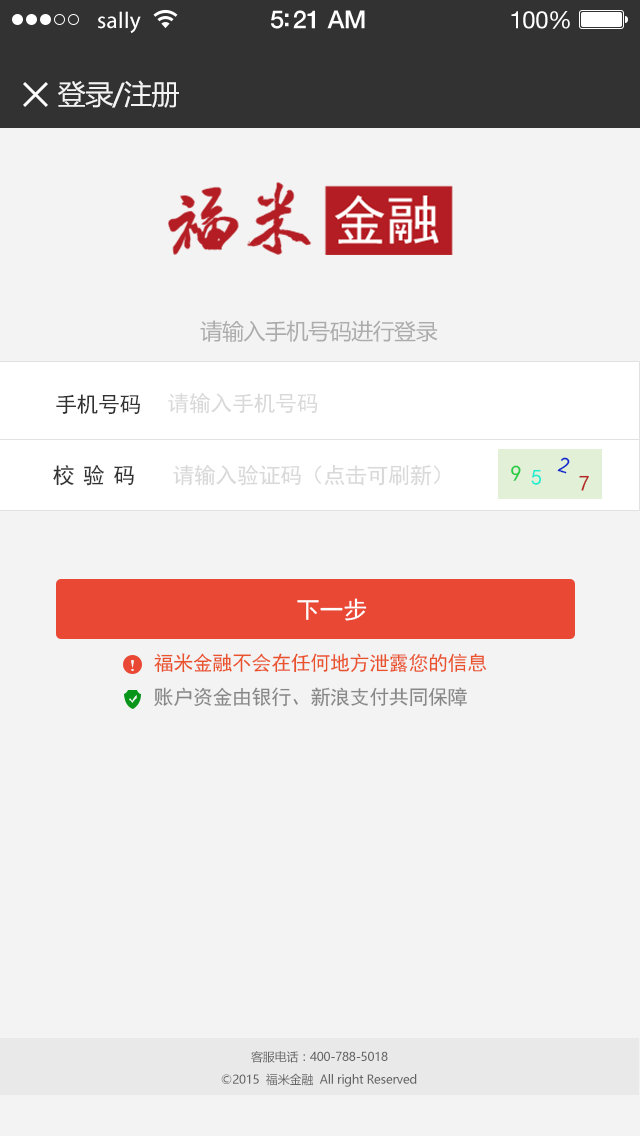
<style>
.page{position:relative;width:640px;height:1136px;background:#f3f3f3}
.page>*{position:absolute;margin:0}
.t1{font:23px "MyriadPro-Regular";letter-spacing:0.02em;color:#ffffff}
.t2{font:25px "HelveticaNeue-Medium";letter-spacing:-0.02em;color:#ffffff}
.t3{font:24px "HelveticaNeue";letter-spacing:-0.02em;color:#ffffff}
.t4{font:28px "MicrosoftYaHei";letter-spacing:-0.02em;color:#f3f3f3}
.t5{font:22px "MicrosoftYaHei";letter-spacing:-0.02em;color:#acacac}
.t6{font:22px "SimHei";letter-spacing:-0.02em;color:#323232}
.t7{font:22px "SimHei";letter-spacing:-0.02em;color:#d9d9d9}
.t8{font:22px "SimHei";letter-spacing:-0.02em;color:#0e29cd}
.t9{font:22px "SimHei";letter-spacing:0.38em;color:#323232}
.t10{font:22px "SimHei";letter-spacing:-0.02em;color:#28cc47}
.t11{font:22px "SimHei";letter-spacing:-0.02em;color:#1eecd1}
.t12{font:22px "SimHei";letter-spacing:-0.02em;color:#b62626}
.t13{font:24px "SimHei";letter-spacing:-0.02em;color:#ffffff}
.t14{font:20px "SimHei";letter-spacing:-0.02em;color:#ea522b}
.t15{font:20px "SimHei";letter-spacing:-0.02em;color:#878787}
.t16{font:12px "MicrosoftYaHei";letter-spacing:-0.02em;color:#646464}
</style>
<div class="page">
<p class="t1" style="left:98px;top:11px;width:43px;height:22px">sally</p>
<p class="t2" style="left:271px;top:10px;width:94px;height:19px">5:21 AM</p>
<p class="t3" style="left:511px;top:11px;width:59px;height:18px">100%</p>
<p class="t4" style="left:58px;top:80px;width:121px;height:28px">登录/注册</p>
<p class="t5" style="left:200px;top:320px;width:238px;height:22px">请输入手机号码进行登录</p>
<p class="t6" style="left:56px;top:394px;width:84px;height:21px">手机号码</p>
<p class="t7" style="left:168px;top:392px;width:150px;height:22px">请输入手机号码</p>
<p class="t8" style="left:557px;top:457px;width:13px;height:17px;rotate:18deg">2</p>
<p class="t9" style="left:53px;top:465px;width:81px;height:21px">校验码</p>
<p class="t7" style="left:173px;top:464px;width:267px;height:22px">请输入验证码（点击可刷新）</p>
<p class="t10" style="left:511px;top:465px;width:10px;height:16px">9</p>
<p class="t11" style="left:531px;top:469px;width:11px;height:16px">5</p>
<p class="t12" style="left:579px;top:475px;width:10px;height:16px">7</p>
<p class="t13" style="left:297px;top:598px;width:70px;height:23px">下一步</p>
<p class="t14" style="left:154px;top:653px;width:333px;height:20px">福米金融不会在任何地方泄露您的信息</p>
<p class="t15" style="left:154px;top:687px;width:313px;height:20px">账户资金由银行、新浪支付共同保障</p>
<p class="t16" style="left:251px;top:1051px;width:137px;height:12px">客服电话：400-788-5018</p>
<p class="t16" style="left:221px;top:1073px;width:196px;height:14px">©2015  福米金融  All right Reserved</p>
</div>
